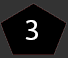
<style>
.page{position:relative;width:68px;height:58px;background:#000000}
.page>*{position:absolute;margin:0}
.t1{font:30px "MyriadPro-Regular";color:#ffffff}
</style>
<div class="page">
<p class="t1" style="left:25px;top:20px;width:13px;height:20px">3</p>
</div>
